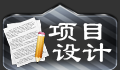
<style>
.page{position:relative;width:120px;height:70px;background:#333333}
.page>*{position:absolute;margin:0}
.t1{font:30px "LiSu";color:#ffffff}
</style>
<div class="page">
<p class="t1" style="left:48px;top:22px;width:54px;height:19px">项目</p>
<p class="t1" style="left:52px;top:43px;width:60px;height:19px">设计</p>
</div>
